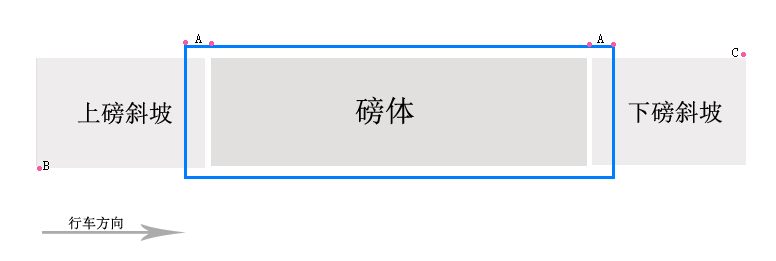
<style>
.page{position:relative;width:776px;height:261px;background:#ffffff}
.page>*{position:absolute;margin:0}
.t1{font:14px "SimSun";color:#000000}
.t2{font:24px "SimSun";color:#000000}
.t3{font:30px "SimSun";color:#000000}
</style>
<div class="page">
<p class="t1" style="left:195px;top:34px;width:7px;height:9px">A</p>
<p class="t1" style="left:597px;top:34px;width:7px;height:9px">A</p>
<p class="t1" style="left:732px;top:48px;width:6px;height:9px">C</p>
<p class="t2" style="left:77px;top:101px;width:95px;height:24px">上磅斜坡</p>
<p class="t3" style="left:355px;top:96px;width:59px;height:29px">磅体</p>
<p class="t2" style="left:628px;top:100px;width:94px;height:24px">下磅斜坡</p>
<p class="t1" style="left:43px;top:161px;width:6px;height:9px">B</p>
<p class="t1" style="left:68px;top:216px;width:55px;height:14px">行车方向</p>
</div>
